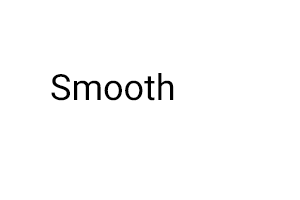
<style>
.page{position:relative;width:300px;height:200px;background:#ffffff}
.page>*{position:absolute;margin:0}
.t1{font:36px "Roboto-Regular";color:#000000}
</style>
<div class="page">
<p class="t1" style="left:51px;top:73px;width:123px;height:28px">Smooth</p>
</div>
